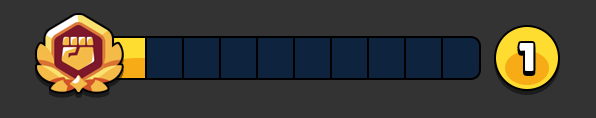
<style>
.page{position:relative;width:596px;height:118px;background:#333333}
.page>*{position:absolute;margin:0}
.t1{font:40px "LilitaOne";color:#ffffff;text-transform:uppercase}
</style>
<div class="page">
<p class="t1" style="left:519px;top:43px;width:15px;height:28px">1</p>
</div>
